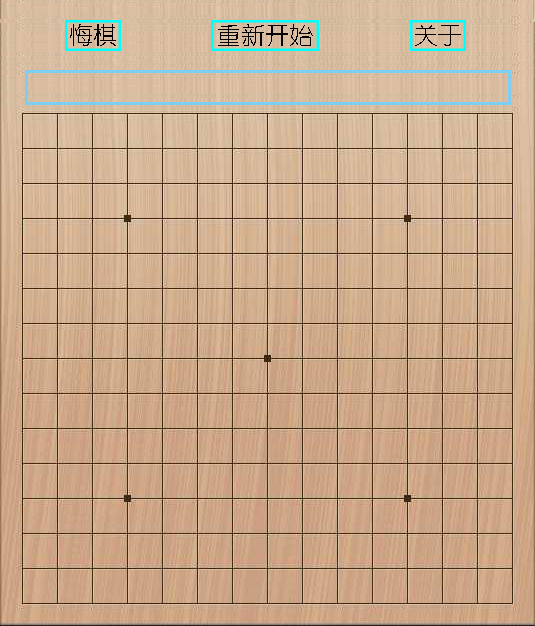
<style>
.page{position:relative;width:535px;height:626px}
.page>*{position:absolute;margin:0}
.t1{font:24px "YouYuan";color:#040404}
</style>
<div class="page">
<p class="t1" style="left:70px;top:24px;width:46px;height:22px">悔棋</p>
<p class="t1" style="left:218px;top:24px;width:95px;height:22px">重新开始</p>
<p class="t1" style="left:415px;top:25px;width:46px;height:21px">关于</p>
</div>
